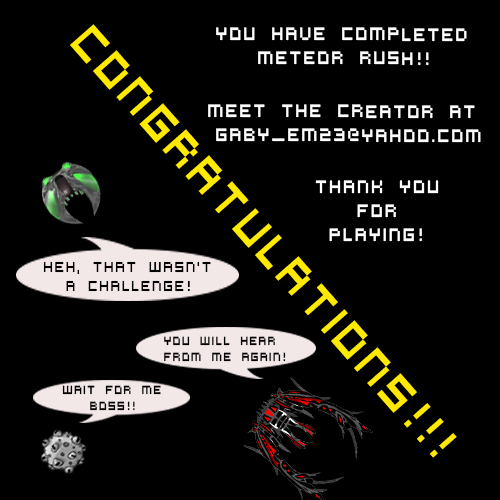
<style>
.page{position:relative;width:500px;height:500px;background:#000000}
.page>*{position:absolute;margin:0}
.t1{font:50px "VirtualDJ";color:#ffea00;scale:0.8 1}
.t2{font:20px "VirtualDJ";color:#ffffff;scale:0.8 1}
.t3{font:16px "VirtualDJ";color:#000000;scale:0.8 1}
.t4{font:13px "VirtualDJ";color:#000000;scale:0.8 1}
</style>
<div class="page">
<p class="t1" style="left:70px;top:24px;width:387px;height:434px;rotate:49deg">CONGRATULATIONS!!!</p>
<p class="t2" style="left:216px;top:27px;width:251px;height:39px">YOU HAVE COMPLETED<br>        METEOR RUSH!!</p>
<p class="t2" style="left:208px;top:104px;width:273px;height:39px">mEET THE CREATOR AT <br>      gABY_EM23@YAHOO.COM</p>
<p class="t2" style="left:315px;top:180px;width:124px;height:62px">tHANK YOU<br>   FOR<br> pLAYING!</p>
<p class="t3" style="left:43px;top:261px;width:168px;height:31px">HEH, THAT wasn’t<br>  a challenge!</p>
<p class="t4" style="left:164px;top:336px;width:122px;height:26px">You will hear <br>  from me again!</p>
<p class="t4" style="left:62px;top:385px;width:99px;height:26px">Wait for me<br>   Boss!!</p>
</div>
